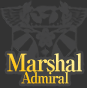
<style>
.page{position:relative;width:87px;height:88px;background:#333333}
.page>*{position:absolute;margin:0}
.t1{font:24px/20px "RyuminPro-ExBold";letter-spacing:-0.08em;scale:0.9 1}
.t2{font:15px/20px "RyuminPro-ExBold";letter-spacing:-0.08em;scale:0.9 1}
</style>
<div class="page">
<p class="t1" style="left:7px;top:53px;width:75px;height:31px;text-align:center">Marshal<br><span class="t2">Admiral</span></p>
</div>
